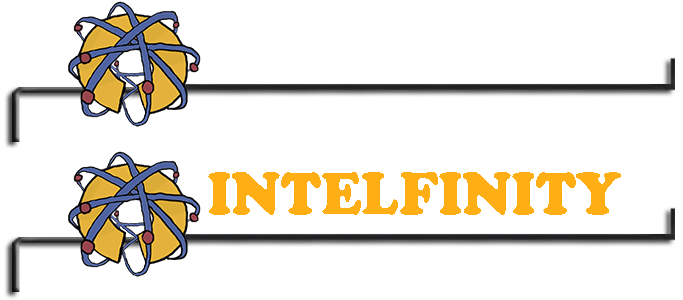
<style>
.page{position:relative;width:683px;height:300px;background:#ffffff}
.page>*{position:absolute;margin:0}
.t1{font:58.2px "CooperBlackStd";color:#ffaf14;scale:0.97 1}
</style>
<div class="page">
<p class="t1" style="left:208px;top:172px;width:413px;height:43px">INTELFINITY</p>
</div>
